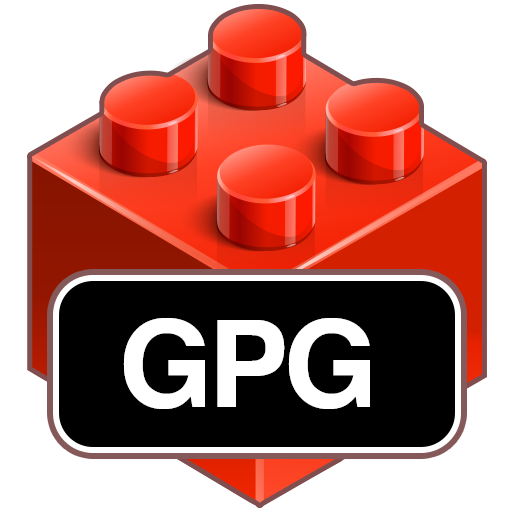
<style>
.page{position:relative;width:512px;height:512px;background:#ffffff}
.page>*{position:absolute;margin:0}
.t1{font:120.4px "Helvetica-Bold";letter-spacing:-0.04em;color:#ffffff}
</style>
<div class="page">
<p class="t1" style="left:123px;top:318px;width:247px;height:91px">GPG</p>
</div>
